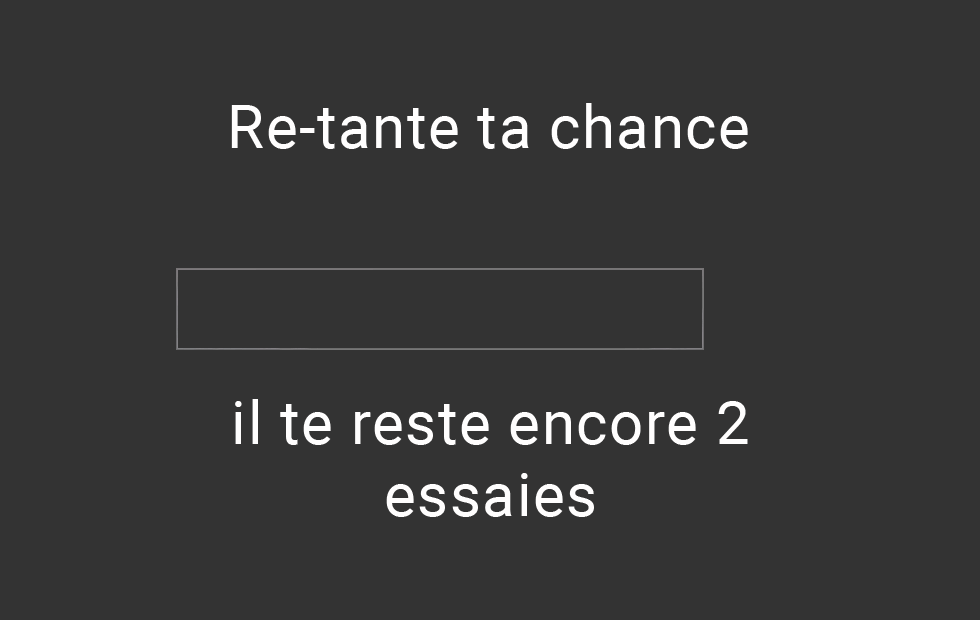
<style>
.page{position:relative;width:980px;height:620px;background:#333333}
.page>*{position:absolute;margin:0}
.t1{font:60px "Roboto-Regular";letter-spacing:0.025em;color:#fffefe}
</style>
<div class="page">
<p class="t1" style="left:231px;top:103px;width:517px;height:46px">Re-tante ta chance</p>
<p class="t1" style="left:235px;top:399px;width:513px;height:118px;text-align:center">il te reste encore 2 essaies</p>
</div>
